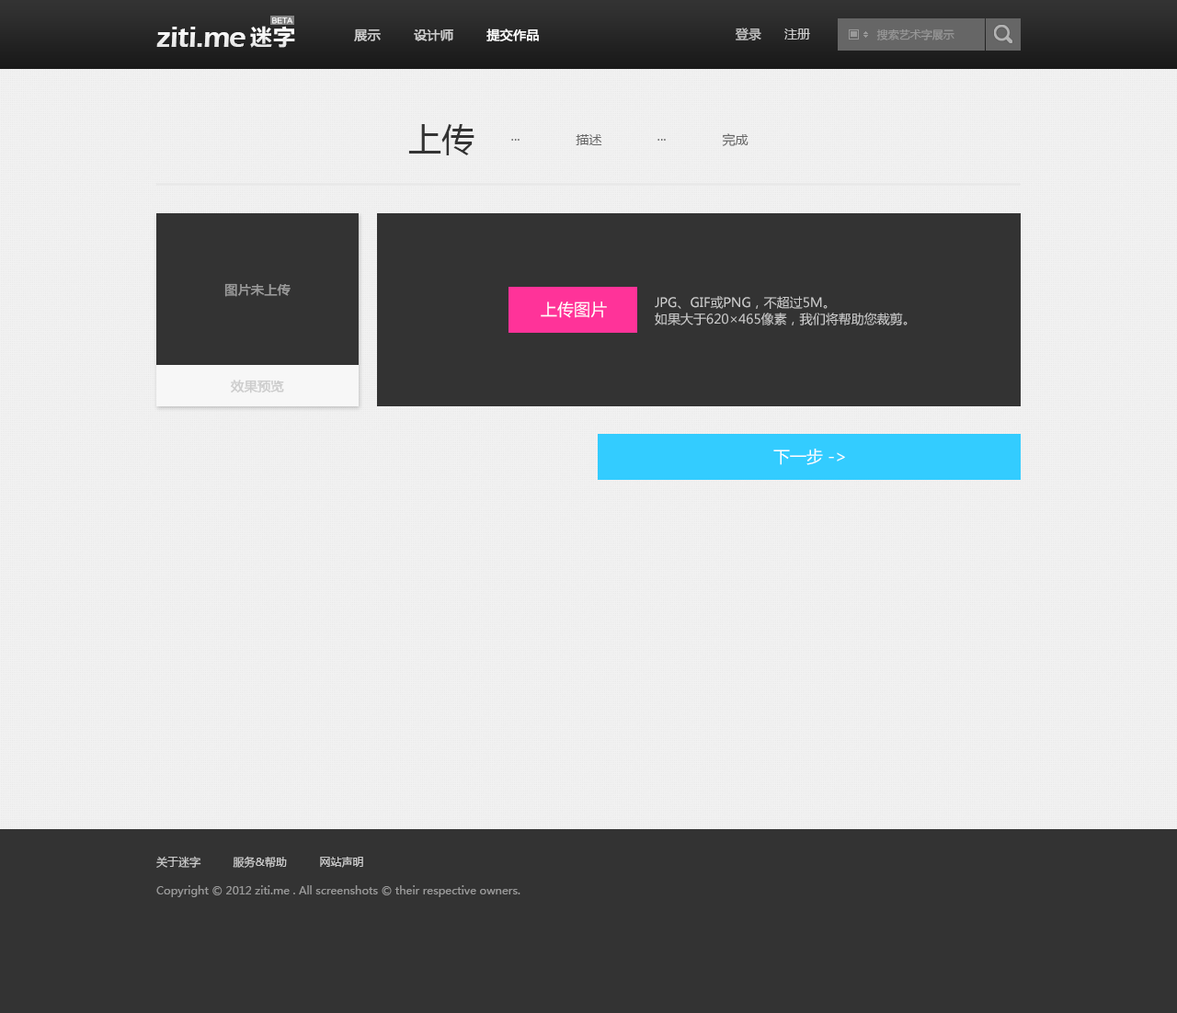
<style>
.page{position:relative;width:1177px;height:1013px;background:#333333}
.page>*{position:absolute;margin:0}
.t1{font:7.1px "FZLTHK--GBK1-0";color:#ffffff;text-transform:uppercase}
.t2{font:30.6px "ErasITC-Demi";letter-spacing:-0.025em;color:#efefef}
.t3{font:22.9px "FZLTCHK--GBK1-0";color:#f2f2f2}
.t4{font:12.9px "MicrosoftYaHei";color:#cccccc;font-weight:bold}
.t5{font:12.9px "MicrosoftYaHei";color:#ffffff;font-weight:bold}
.t6{font:12.9px "MicrosoftYaHei";color:#cccccc}
.t7{font:11px "MicrosoftYaHei";color:#999999}
.t8{font:33.1px "MicrosoftYaHei";color:#333333}
.t9{font:12.9px "MicrosoftYaHei";color:#666666}
.t10{font:12.9px "MicrosoftYaHei";color:#999999;font-weight:bold}
.t11{font:16.5px "MicrosoftYaHei";color:#ffffff}
.t12{font:12.9px/16.5px "MicrosoftYaHei";color:#cccccc}
.t13{font:11px "MicrosoftYaHei";color:#cccccc}
</style>
<div class="page">
<p class="t1" style="left:272px;top:17px;width:20px;height:7px">beta</p>
<p class="t2" style="left:156px;top:27px;width:89px;height:20px">ziti.me</p>
<p class="t3" style="left:250px;top:26px;width:45px;height:22px">迷字</p>
<p class="t4" style="left:354px;top:29px;width:185px;height:12px">展示        设计师        <span class="t5">提交作品</span></p>
<p class="t6" style="left:736px;top:28px;width:74px;height:12px">登录      注册</p>
<p class="t7" style="left:876px;top:29px;width:78px;height:11px">搜索艺术字展示</p>
<p class="t8" style="left:408px;top:124px;width:66px;height:31px">上传</p>
<p class="t9" style="left:576px;top:134px;width:26px;height:11px">描述</p>
<p class="t9" style="left:722px;top:133px;width:26px;height:13px">完成</p>
<p class="t9" style="left:511px;top:139px;width:8px;height:2px">...</p>
<p class="t9" style="left:657px;top:139px;width:9px;height:2px">...</p>
<p class="t10" style="left:224px;top:283px;width:67px;height:14px">图片未上传</p>
<p class="t10" style="left:224px;top:283px;width:67px;height:14px">图片未上传</p>
<p class="t11" style="left:541px;top:302px;width:66px;height:16px">上传图片</p>
<p class="t12" style="left:655px;top:296px;width:252px;height:29px">JPG、GIF或PNG，不超过5M。<br>如果大于620×465像素，我们将帮助您裁剪。</p>
<p class="t4" style="left:231px;top:380px;width:53px;height:14px">效果预览</p>
<p class="t4" style="left:231px;top:380px;width:53px;height:14px">效果预览</p>
<p class="t11" style="left:773px;top:449px;width:72px;height:16px">下一步 -&gt;</p>
<p class="t13" style="left:156px;top:856px;width:207px;height:12px">关于迷字          服务&amp;帮助          网站声明</p>
<p class="t7" style="left:156px;top:885px;width:364px;height:12px">Copyright © 2012 ziti.me . All screenshots © their respective owners.</p>
</div>
